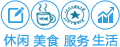
<style>
.page{position:relative;width:120px;height:47px;background:#ffffff}
.page>*{position:absolute;margin:0}
.t1{font:12.4px "MicrosoftYaHei";letter-spacing:0.05em;color:#2da1e7}
</style>
<div class="page">
<p class="t1" style="left:3px;top:34px;width:26px;height:13px">休闲</p>
<p class="t1" style="left:33px;top:34px;width:26px;height:13px">美食</p>
<p class="t1" style="left:64px;top:34px;width:26px;height:13px">服务</p>
<p class="t1" style="left:92px;top:34px;width:26px;height:13px">生活</p>
</div>
